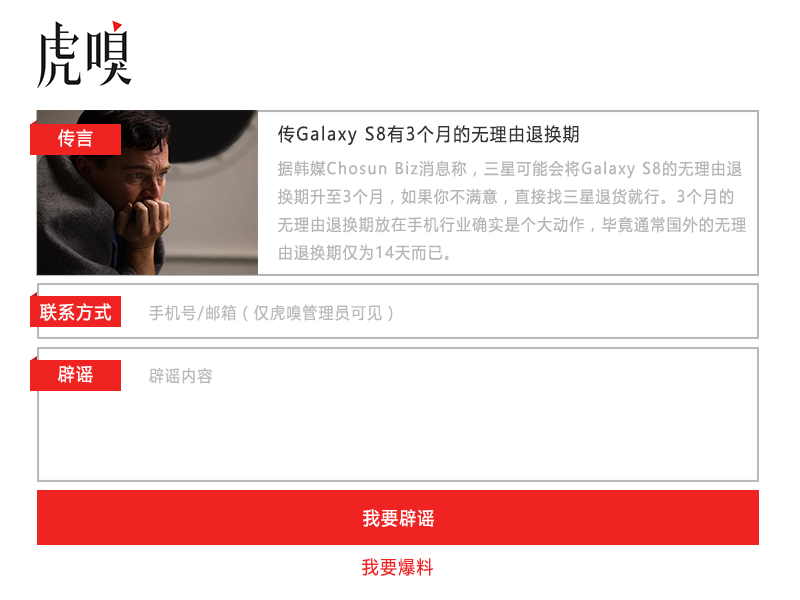
<style>
.page{position:relative;width:800px;height:600px;background:#ffffff}
.page>*{position:absolute;margin:0}
.t1{font:18px "MicrosoftYaHei";letter-spacing:0.1em;color:#333333;scale:0.92 1}
.t2{font:18px "MicrosoftYaHei";letter-spacing:0.1em;color:#ffffff;scale:0.92 1}
.t3{font:16px "MicrosoftYaHei";letter-spacing:0.1em;color:#b5b5b5;scale:0.92 1}
.t4{font:16px "MicrosoftYaHei";letter-spacing:0.1em;color:#bababa;scale:0.92 1}
.t5{font:18px "MicrosoftYaHei";letter-spacing:0.1em;color:#ef2322;scale:0.92 1}
</style>
<div class="page">
<p class="t1" style="left:278px;top:125px;width:301px;height:20px">传Galaxy S8有3个月的无理由退换期</p>
<p class="t2" style="left:58px;top:129px;width:35px;height:18px">传言</p>
<p class="t3" style="left:278px;top:160px;width:468px;height:101px">据韩媒Chosun Biz消息称，三星可能会将Galaxy S8的无理由退换期升至3个月，如果你不满意，直接找三星退货就行。3个月的无理由退换期放在手机行业确实是个大动作，毕竟通常国外的无理由退换期仅为14天而已。</p>
<p class="t2" style="left:40px;top:303px;width:71px;height:18px">联系方式</p>
<p class="t4" style="left:149px;top:304px;width:244px;height:18px">手机号/邮箱（仅虎嗅管理员可见）</p>
<p class="t2" style="left:58px;top:365px;width:35px;height:18px">辟谣</p>
<p class="t4" style="left:149px;top:367px;width:64px;height:17px">辟谣内容</p>
<p class="t2" style="left:363px;top:509px;width:71px;height:18px">我要辟谣</p>
<p class="t5" style="left:362px;top:558px;width:71px;height:18px">我要爆料</p>
</div>
